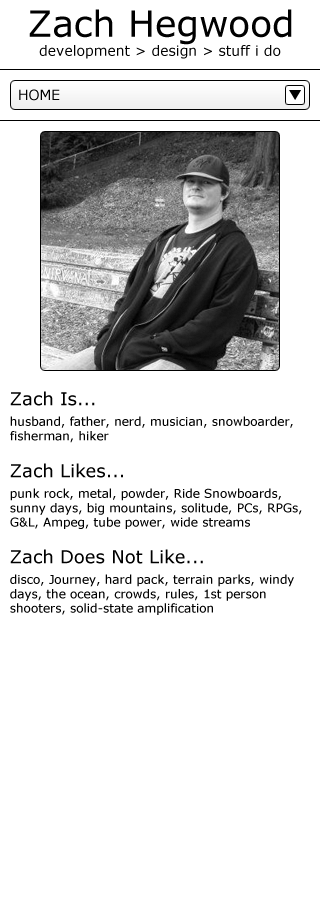
<style>
.page{position:relative;width:320px;height:900px;background:#ffffff}
.page>*{position:absolute;margin:0}
.t1{font:36px "Verdana";color:#000000}
.t2{font:14px "Verdana";color:#000000}
.t3{font:18px "Verdana";color:#000000}
.t4{font:12px "Verdana";color:#000000}
</style>
<div class="page">
<p class="t1" style="left:29px;top:9px;width:263px;height:36px">Zach Hegwood</p>
<p class="t2" style="left:39px;top:45px;width:242px;height:14px">development &gt; design &gt; stuff i do</p>
<p class="t2" style="left:19px;top:89px;width:41px;height:12px">HOME</p>
<p class="t3" style="left:10px;top:391px;width:85px;height:15px">Zach Is...</p>
<p class="t4" style="left:10px;top:416px;width:283px;height:27px">husband, father, nerd, musician, snowboarder,<br>fisherman, hiker</p>
<p class="t3" style="left:10px;top:463px;width:113px;height:15px">Zach Likes...</p>
<p class="t4" style="left:10px;top:488px;width:292px;height:41px">punk rock, metal, powder, Ride Snowboards,<br>sunny days, big mountains, solitude, PCs, RPGs,<br>G&amp;L, Ampeg, tube power, wide streams</p>
<p class="t3" style="left:10px;top:549px;width:193px;height:15px">Zach Does Not Like...</p>
<p class="t4" style="left:10px;top:574px;width:284px;height:41px">disco, Journey, hard pack, terrain parks, windy<br>days, the ocean, crowds, rules, 1st person<br>shooters, solid-state amplification</p>
</div>
